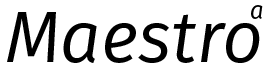
<style>
.page{position:relative;width:271px;height:71px;background:#ffffff}
.page>*{position:absolute;margin:0}
.t1{font:24px "FiraSans-BookItalic";color:#000000}
.t2{font:72px "FiraSans-BookItalic";color:#000000}
</style>
<div class="page">
<p class="t1" style="left:251px;top:5px;width:12px;height:14px">a</p>
<p class="t2" style="left:7px;top:12px;width:253px;height:51px">Maestro</p>
</div>
